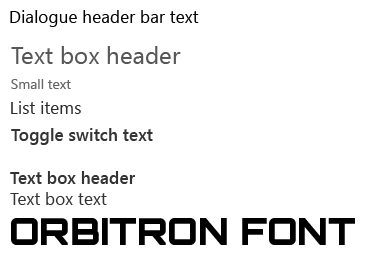
<style>
.page{position:relative;width:369px;height:268px;background:#ffffff}
.page>*{position:absolute;margin:0}
.t1{font:17.3px "SegoeUI";color:#010101}
.t2{font:24.3px "SegoeUI";color:#575757}
.t3{font:13.9px "SegoeUI";color:#666666}
.t4{font:17.3px "SegoeUI";color:#2d2d2d}
.t5{font:17.3px "SegoeUI-Semibold";color:#343434}
.t6{font:17.3px "SegoeUI-Semibold";color:#333333}
.t7{font:17.3px "SegoeUI";color:#333333}
.t8{font:36.8px "Orbitron-Black";color:#000000;text-transform:uppercase}
</style>
<div class="page">
<p class="t1" style="left:10px;top:10px;width:189px;height:17px">Dialogue header bar text</p>
<p class="t2" style="left:11px;top:46px;width:170px;height:18px">Text box header</p>
<p class="t3" style="left:11px;top:79px;width:60px;height:10px">Small text</p>
<p class="t4" style="left:11px;top:101px;width:70px;height:13px">List items</p>
<p class="t5" style="left:11px;top:128px;width:142px;height:17px">Toggle switch text</p>
<p class="t6" style="left:10px;top:171px;width:125px;height:34px">Text box header<br><span class="t7">Text box text</span></p>
<p class="t8" style="left:11px;top:218px;width:344px;height:27px">orbitron font</p>
</div>
